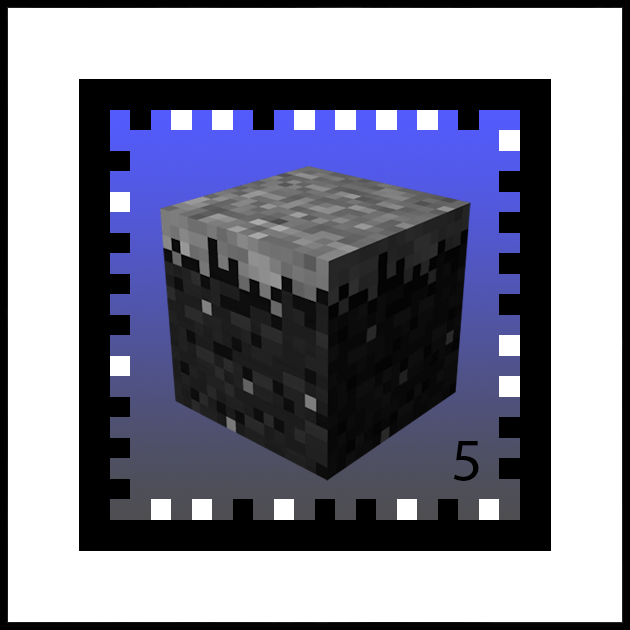
<style>
.page{position:relative;width:630px;height:630px;background:#ffffff}
.page>*{position:absolute;margin:0}
.t1{font:61.1px "MyriadPro-Regular";color:#000000;font-variant:small-caps}
</style>
<div class="page">
<p class="t1" style="left:453px;top:441px;width:26px;height:40px">5</p>
</div>
